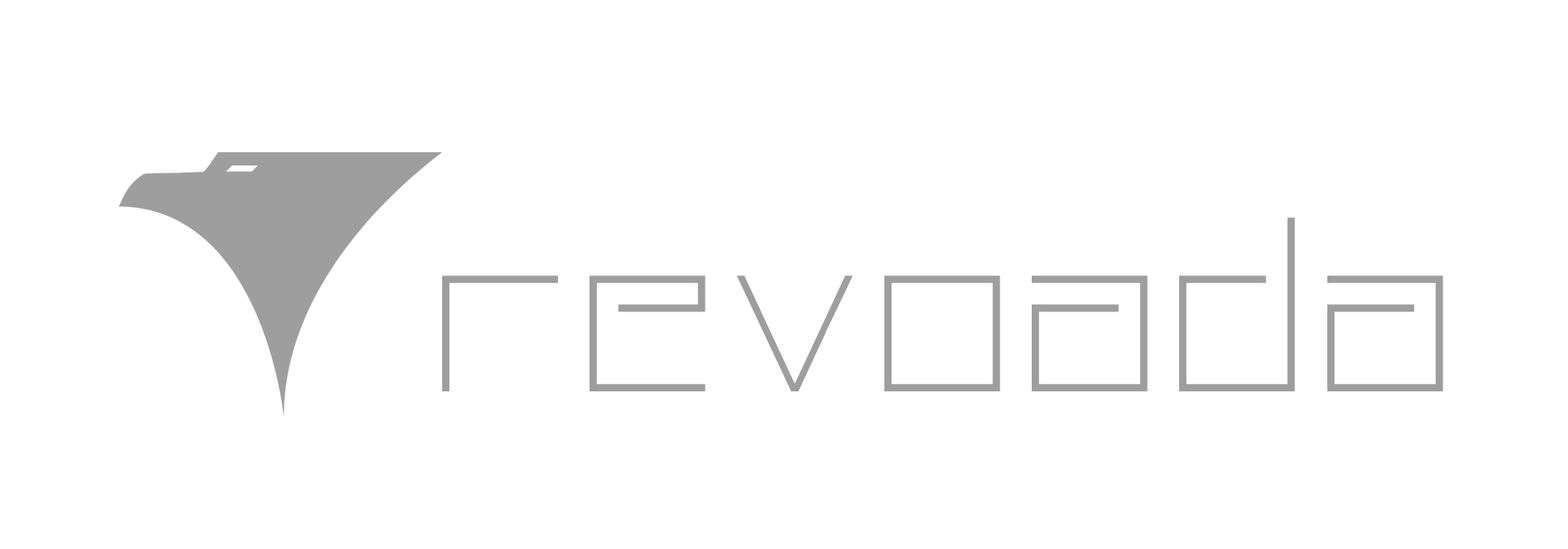
<style>
.page{position:relative;width:1568px;height:549px;background:#ffffff}
.page>*{position:absolute;margin:0}
.t1{font:289.3px "SquaredDisplay";letter-spacing:0.01em;color:#9e9e9e}
</style>
<div class="page">
<p class="t1" style="left:442px;top:217px;width:1001px;height:174px">revoada</p>
</div>
